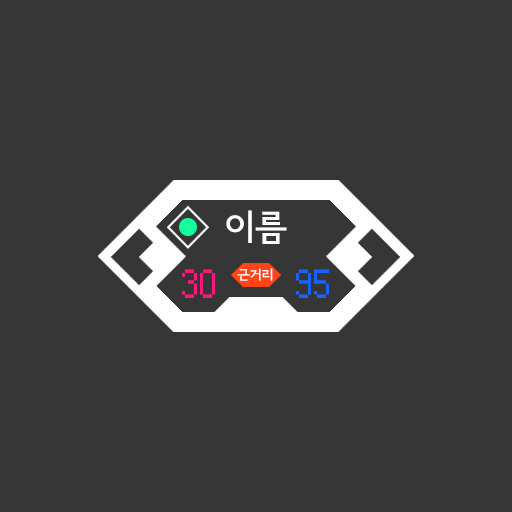
<style>
.page{position:relative;width:512px;height:512px;background:#363636}
.page>*{position:absolute;margin:0}
.t1{font:35.3px "SeoulNamsanB";color:#ffffff}
.t2{font:38px "Small Fonts";color:#ff167c}
.t3{font:12.9px "SeoulNamsanB";color:#ffffff;scale:1.07 1}
.t4{font:38px "Small Fonts";color:#1664ff}
</style>
<div class="page">
<p class="t1" style="left:226px;top:210px;width:61px;height:34px">이름</p>
<p class="t2" style="left:182px;top:269px;width:33px;height:29px">30</p>
<p class="t3" style="left:237px;top:268px;width:36px;height:13px">근거리</p>
<p class="t4" style="left:296px;top:269px;width:33px;height:29px">95</p>
</div>
